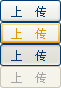
<style>
.page{position:relative;width:61px;height:88px}
.page>*{position:absolute;margin:0}
.t1{font:12px "SimSun";color:#003c74}
.t2{font:12px "SimSun";color:#e59700}
.t3{font:12px "SimSun";color:#a6a5a5}
</style>
<div class="page">
<p class="t1" style="left:11px;top:6px;width:35px;height:11px">上  传</p>
<p class="t2" style="left:11px;top:28px;width:35px;height:11px">上  传</p>
<p class="t1" style="left:11px;top:50px;width:35px;height:11px">上  传</p>
<p class="t3" style="left:11px;top:72px;width:35px;height:11px">上  传</p>
</div>
